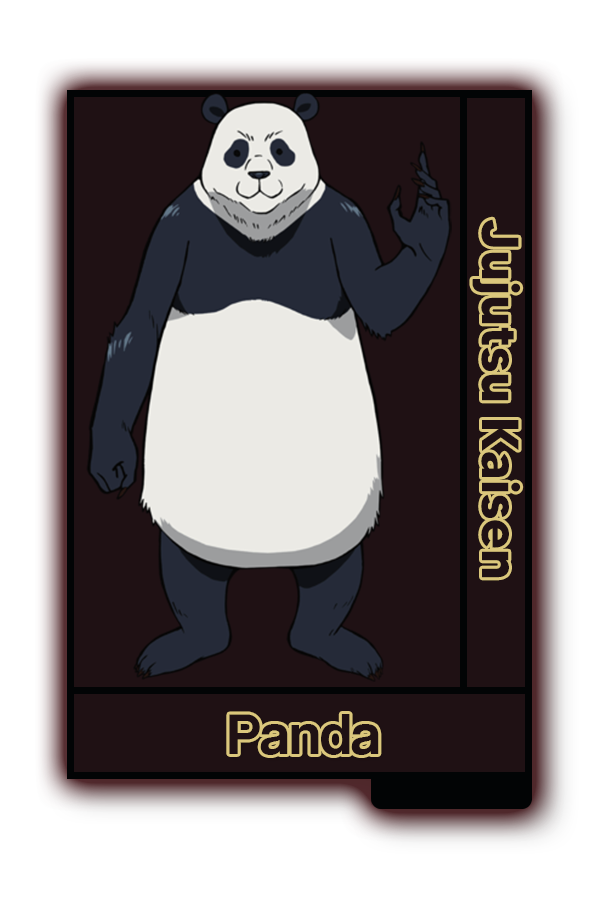
<style>
.page{position:relative;width:600px;height:900px;background:#1f1114}
.page>*{position:absolute;margin:0}
.t1{font:52px "MADETOMMY-Bold";color:#1e1214}
.t2{font:60.3px "CoolveticaRg-Regular";color:#1e1214}
</style>
<div class="page">
<p class="t1" style="left:472px;top:219px;width:49px;height:359px;rotate:90deg">Jujutsu Kaisen</p>
<p class="t2" style="left:229px;top:714px;width:150px;height:41px">Panda</p>
</div>
